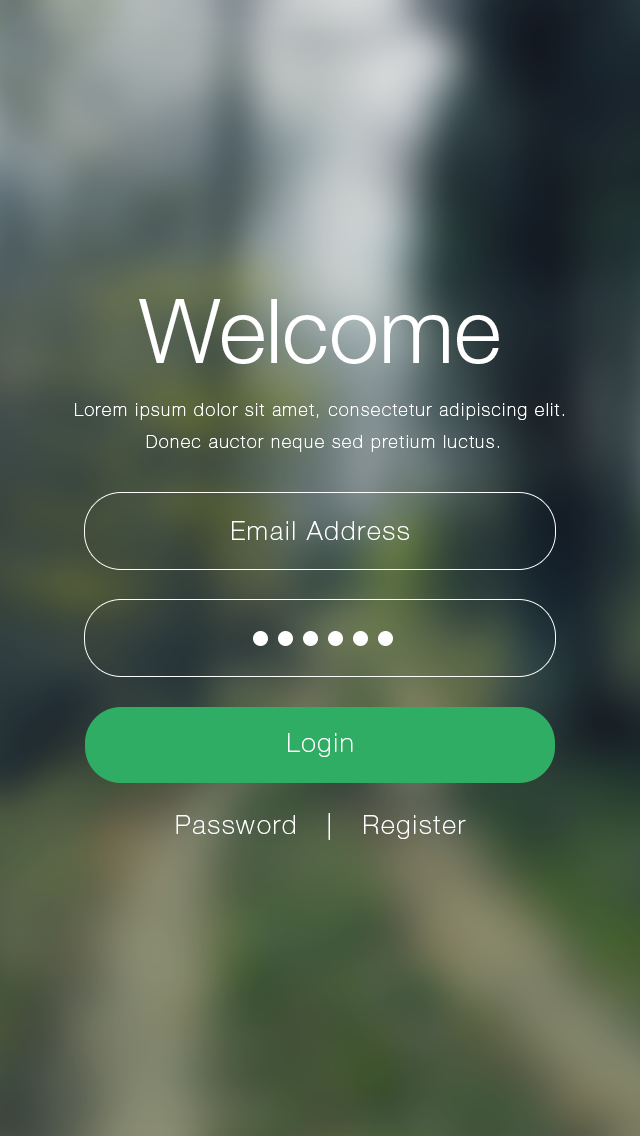
<style>
.page{position:relative;width:640px;height:1136px}
.page>*{position:absolute;margin:0}
.t1{font:90px "HelveticaNeueLTPro-Lt";color:#ffffff}
.t2{font:18px/32px "HelveticaNeueLTPro-Th";letter-spacing:0.08em;color:#ffffff}
.t3{font:26px "HelveticaNeueLTPro-Th";letter-spacing:0.08em;color:#ffffff}
</style>
<div class="page">
<p class="t1" style="left:139px;top:299px;width:360px;height:65px">Welcome</p>
<p class="t2" style="left:75px;top:403px;width:489px;height:49px;text-align:center">Lorem ipsum dolor sit amet, consectetur adipiscing elit.<br> Donec auctor neque sed pretium luctus.</p>
<p class="t3" style="left:232px;top:521px;width:177px;height:19px">Email Address</p>
<p class="t3" style="left:288px;top:733px;width:65px;height:24px">Login</p>
<p class="t3" style="left:176px;top:813px;width:290px;height:27px">Password   |   Register</p>
</div>
